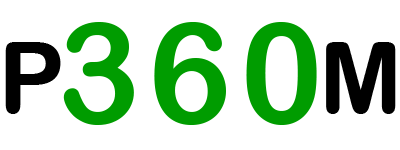
<style>
.page{position:relative;width:400px;height:150px;background:#ffffff}
.page>*{position:absolute;margin:0}
.t1{font:140px "ArialRoundedMTBold";letter-spacing:0.06em;color:#009c00}
.t2{font:100px "ArialRoundedMTBold";letter-spacing:0.06em;color:#000000}
</style>
<div class="page">
<p class="t1" style="left:63px;top:22px;width:254px;height:103px">360</p>
<p class="t2" style="left:5px;top:42px;width:391px;height:72px">P        M</p>
</div>
